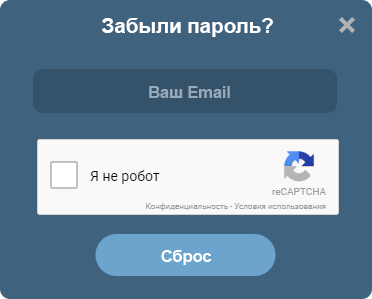
<style>
.page{position:relative;width:372px;height:299px;background:#3f637f}
.page>*{position:absolute;margin:0}
.t1{font:20.8px "Arial-BoldMT";letter-spacing:-0.01em;color:#ffffff}
.t2{font:16.7px "Arial-BoldMT";letter-spacing:-0.01em;color:#96aaba}
.t3{font:16.7px "Arial-BoldMT";letter-spacing:-0.01em;color:#ffffff}
</style>
<div class="page">
<p class="t1" style="left:102px;top:18px;width:171px;height:19px">Забыли пароль?</p>
<p class="t2" style="left:149px;top:86px;width:81px;height:12px">Ваш Email</p>
<p class="t3" style="left:161px;top:250px;width:51px;height:15px">Сброс</p>
</div>
